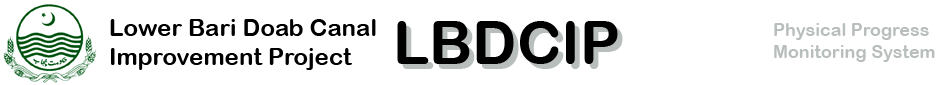
<style>
.page{position:relative;width:950px;height:85px;background:#ffffff}
.page>*{position:absolute;margin:0}
.t1{font:24px "ArialRoundedMTBold";color:#000000}
.t2{font:60px "ArialRoundedMTBold";color:#000000}
.t3{font:18px "ArialRoundedMTBold";color:#b8bebc}
</style>
<div class="page">
<p class="t1" style="left:110px;top:19px;width:266px;height:51px">Lower Bari Doab Canal<br>Improvement Project</p>
<p class="t2" style="left:397px;top:21px;width:221px;height:43px">LBDCIP</p>
<p class="t3" style="left:774px;top:23px;width:161px;height:39px">Physical Progress<br>Monitoring System</p>
</div>
